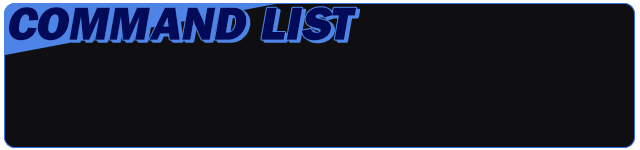
<style>
.page{position:relative;width:640px;height:150px;background:#0f0f11}
.page>*{position:absolute;margin:0}
.t1{font:48px "FranklinGothic-Heavy";letter-spacing:0.05em;color:#030a58;font-style:italic}
</style>
<div class="page">
<p class="t1" style="left:9px;top:7px;width:348px;height:34px">COMMAND LIST</p>
</div>
